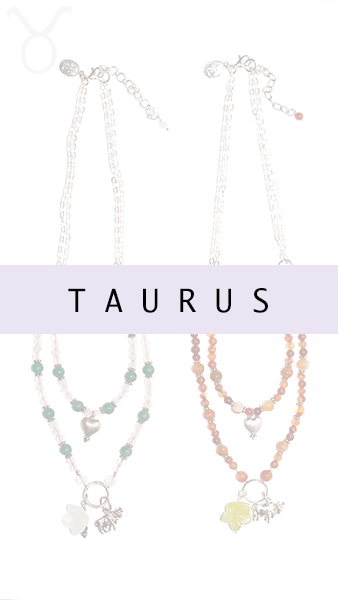
<style>
.page{position:relative;width:338px;height:600px;background:#ffffff}
.page>*{position:absolute;margin:0}
.t1{font:30.8px "Ayuthaya";color:#000000}
</style>
<div class="page">
<p class="t1" style="left:68px;top:288px;width:200px;height:25px">T A U R U S</p>
</div>
